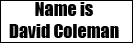
<style>
.page{position:relative;width:133px;height:43px;background:#ffffff}
.page>*{position:absolute;margin:0}
.t1{font:18px "Impact";color:#000000}
</style>
<div class="page">
<p class="t1" style="left:9px;top:2px;width:110px;height:36px;text-align:center">Name is<br>David Coleman</p>
</div>
